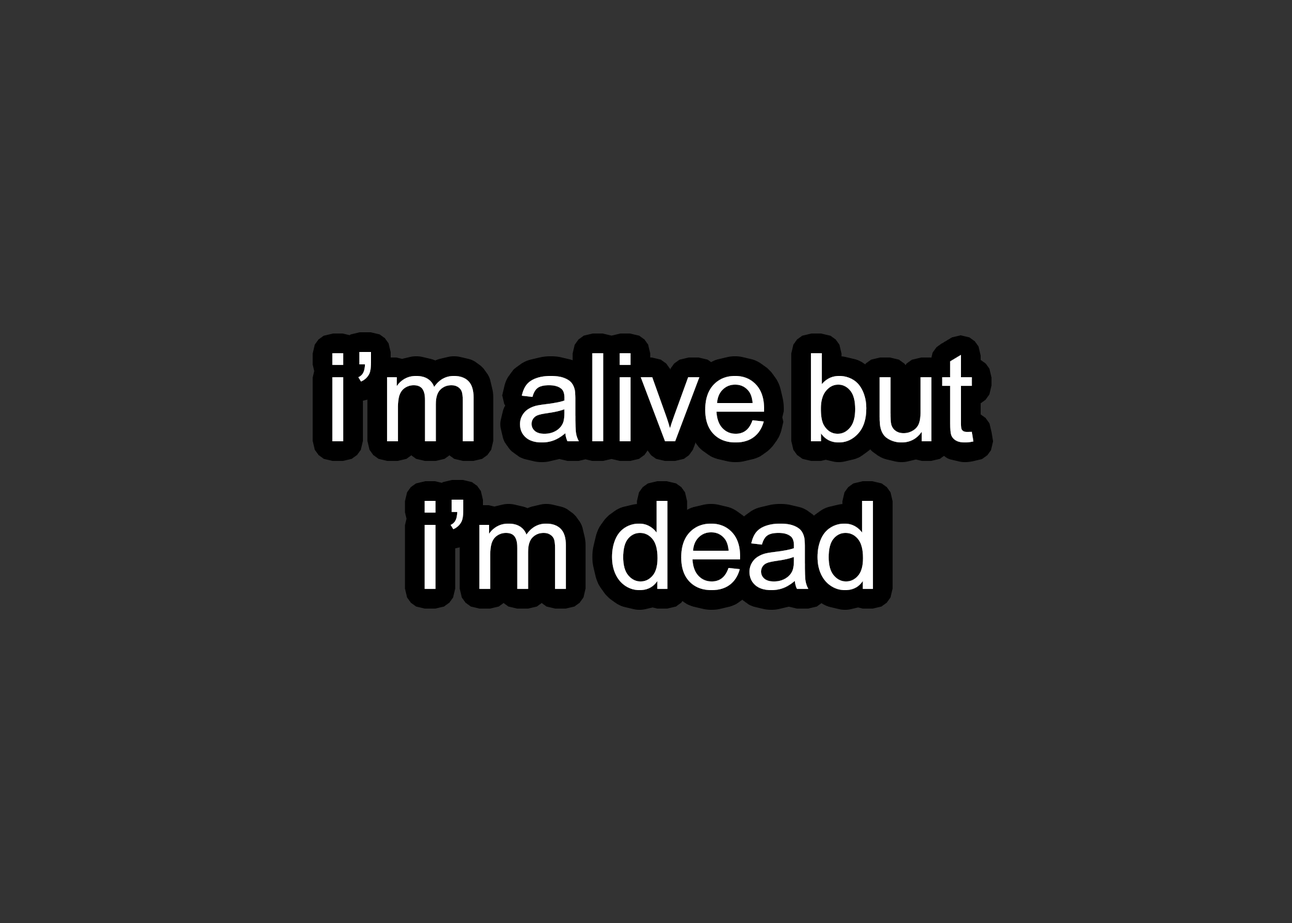
<style>
.page{position:relative;width:1292px;height:923px;background:#333333}
.page>*{position:absolute;margin:0}
.t1{font:123.1px "ArialMT";color:#ffffff}
</style>
<div class="page">
<p class="t1" style="left:332px;top:352px;width:642px;height:238px;text-align:center">i’m alive but <br>i’m dead</p>
</div>
